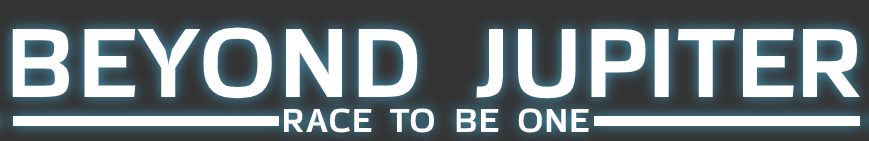
<style>
.page{position:relative;width:869px;height:141px;background:#ffffff}
.page>*{position:absolute;margin:0}
.t1{font:106px "AzoftSans-Bold";color:#ffffff}
.t2{font:36px "AzoftSans-Bold";color:#ffffff}
</style>
<div class="page">
<p class="t1" style="left:12px;top:27px;width:849px;height:72px">BEYOND JUPITER</p>
<p class="t2" style="left:283px;top:108px;width:306px;height:25px">RACE TO BE ONE</p>
</div>
